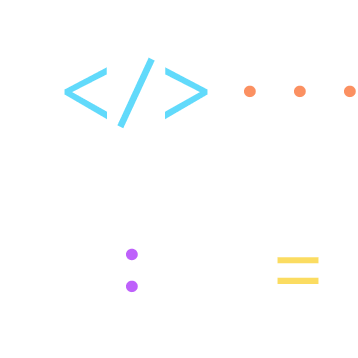
<style>
.page{position:relative;width:358px;height:358px;background:#ffffff}
.page>*{position:absolute;margin:0}
.t1{font:100px "Inconsolata";color:#61dafb}
.t2{font:100px "Inconsolata";color:#fb9061}
.t3{font:100px "Inconsolata";color:#be61fb}
.t4{font:100px "Inconsolata";color:#fbdc61}
</style>
<div class="page">
<p class="t1" style="left:64px;top:57px;width:144px;height:72px">&lt;/&gt;</p>
<p class="t2" style="left:244px;top:85px;width:112px;height:13px">...</p>
<p class="t3" style="left:126px;top:248px;width:12px;height:45px">:</p>
<p class="t4" style="left:277px;top:257px;width:42px;height:27px">=</p>
</div>
